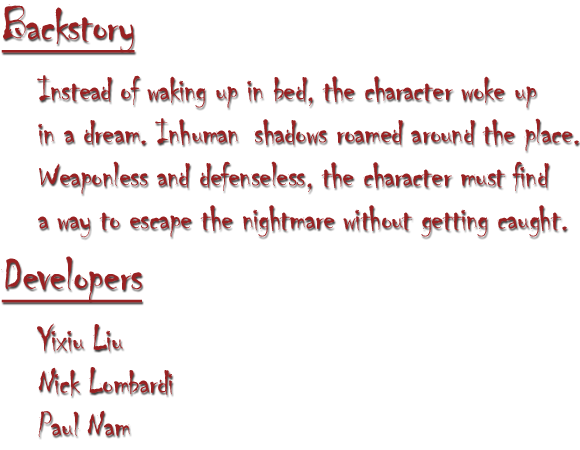
<style>
.page{position:relative;width:580px;height:450px;background:#ffffff}
.page>*{position:absolute;margin:0}
.t1{font:36px "Chiller-Regular";letter-spacing:-0.025em;color:#992122}
.t2{font:50px "Chiller-Regular";letter-spacing:-0.025em;color:#992122;text-decoration:underline}
</style>
<div class="page">
<p class="t1" style="left:1px;top:4px;width:578px;height:433px"><span class="t2">Backstory<br> </span>Instead of waking up in bed, the character woke up <br> in a dream. Inhuman shadows roamed around the place.<br> Weaponless and defenseless, the character must find <br> a way to escape the nightmare without getting caught.<br><span class="t2">Developers<br> </span>Yixiu Liu<br> Nick Lombardi<br> Paul Nam</p>
</div>
